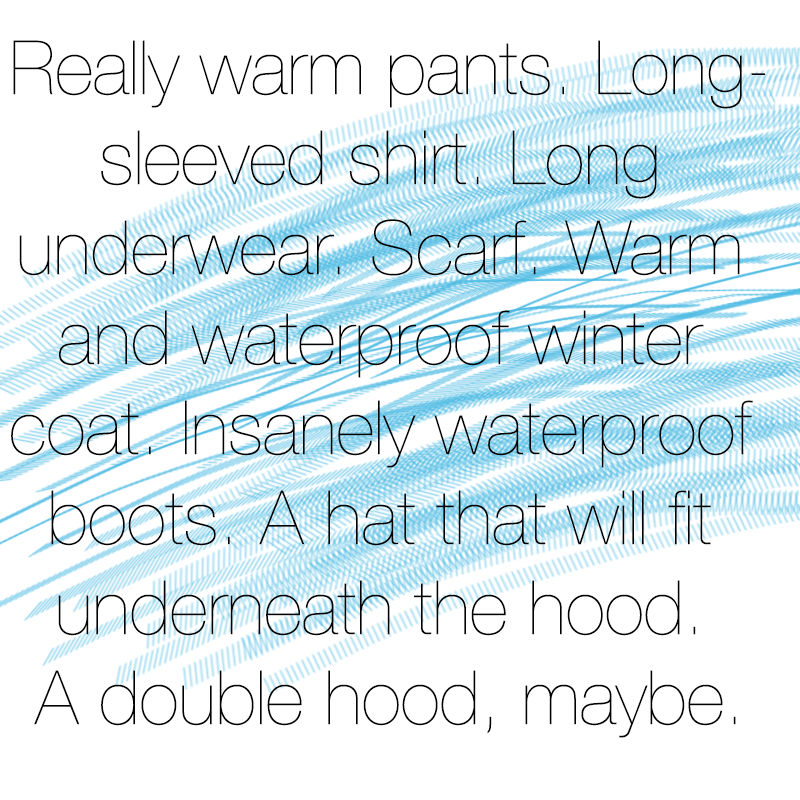
<style>
.page{position:relative;width:800px;height:800px;background:#ffffff}
.page>*{position:absolute;margin:0}
.t1{font:75px "HelveticaNeue-UltraLight";color:#000000}
</style>
<div class="page">
<p class="t1" style="left:11px;top:40px;width:754px;height:698px;text-align:center">Really warm pants. Long-<br>sleeved shirt. Long <br>underwear. Scarf. Warm <br>and waterproof winter <br>coat. Insanely waterproof <br>boots. A hat that will fit <br>underneath the hood. <br>A double hood, maybe.</p>
</div>
